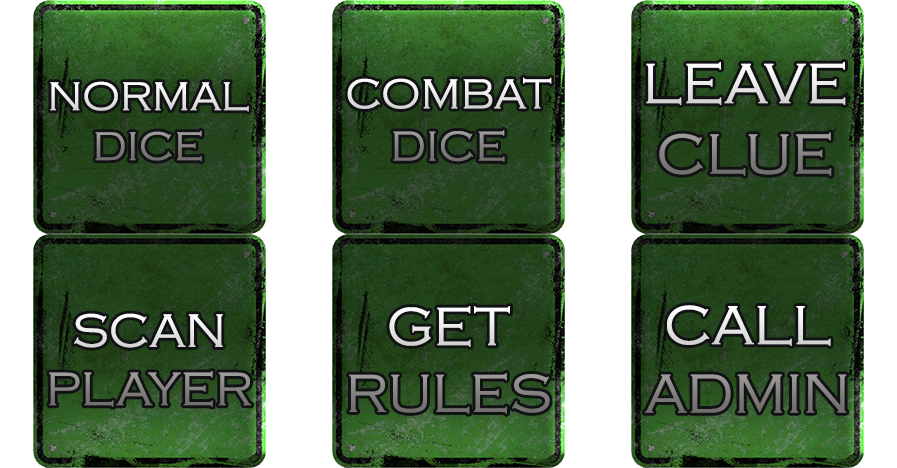
<style>
.page{position:relative;width:897px;height:468px;background:#ffffff}
.page>*{position:absolute;margin:0}
.t1{font:58.8px "CopperplateGothic-Light";text-transform:uppercase}
.t2{font:43.6px "CopperplateGothic-Light";text-transform:uppercase}
.t3{font:41.6px "CopperplateGothic-Light";text-transform:uppercase}
.t4{font:57.1px "CopperplateGothic-Light";text-transform:uppercase}
.t5{font:48.7px "CopperplateGothic-Light";text-transform:uppercase}
.t6{font:55.8px "CopperplateGothic-Light";text-transform:uppercase}
</style>
<div class="page">
<p class="t1" style="left:646px;top:62px;width:200px;height:114px;text-align:center">Leave<br>CLUE</p>
<p class="t2" style="left:347px;top:77px;width:205px;height:85px;text-align:center">COMBAT<br>DICE</p>
<p class="t3" style="left:50px;top:81px;width:199px;height:81px;text-align:center">NORMAL<br>DICE</p>
<p class="t4" style="left:644px;top:305px;width:203px;height:108px;text-align:center">CALL<br>ADMIN</p>
<p class="t5" style="left:49px;top:313px;width:203px;height:94px;text-align:center">SCAN<br>PLAYER</p>
<p class="t6" style="left:349px;top:306px;width:201px;height:108px;text-align:center">GET<br>RULES</p>
</div>
